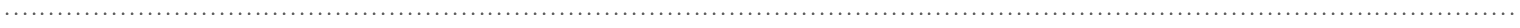
<style>
.page{position:relative;width:1520px;height:28px;background:#ffffff}
.page>*{position:absolute;margin:0}
.t1{font:16px "Poppins-SemiBold";letter-spacing:0.3em;color:#5f5f5f}
</style>
<div class="page">
<p class="t1" style="left:5px;top:12px;width:1509px;height:3px">.........................................................................................................................................................................</p>
</div>
